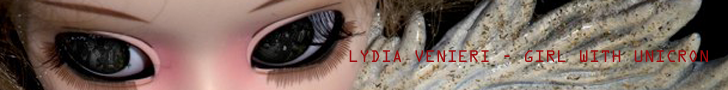
<style>
.page{position:relative;width:728px;height:90px}
.page>*{position:absolute;margin:0}
.t1{font:15.2px "OCRAStd";color:#9d0a0e}
</style>
<div class="page">
<p class="t1" style="left:349px;top:50px;width:359px;height:12px">LYDIA VENIERI - GIRL WITH UNICRON</p>
</div>
